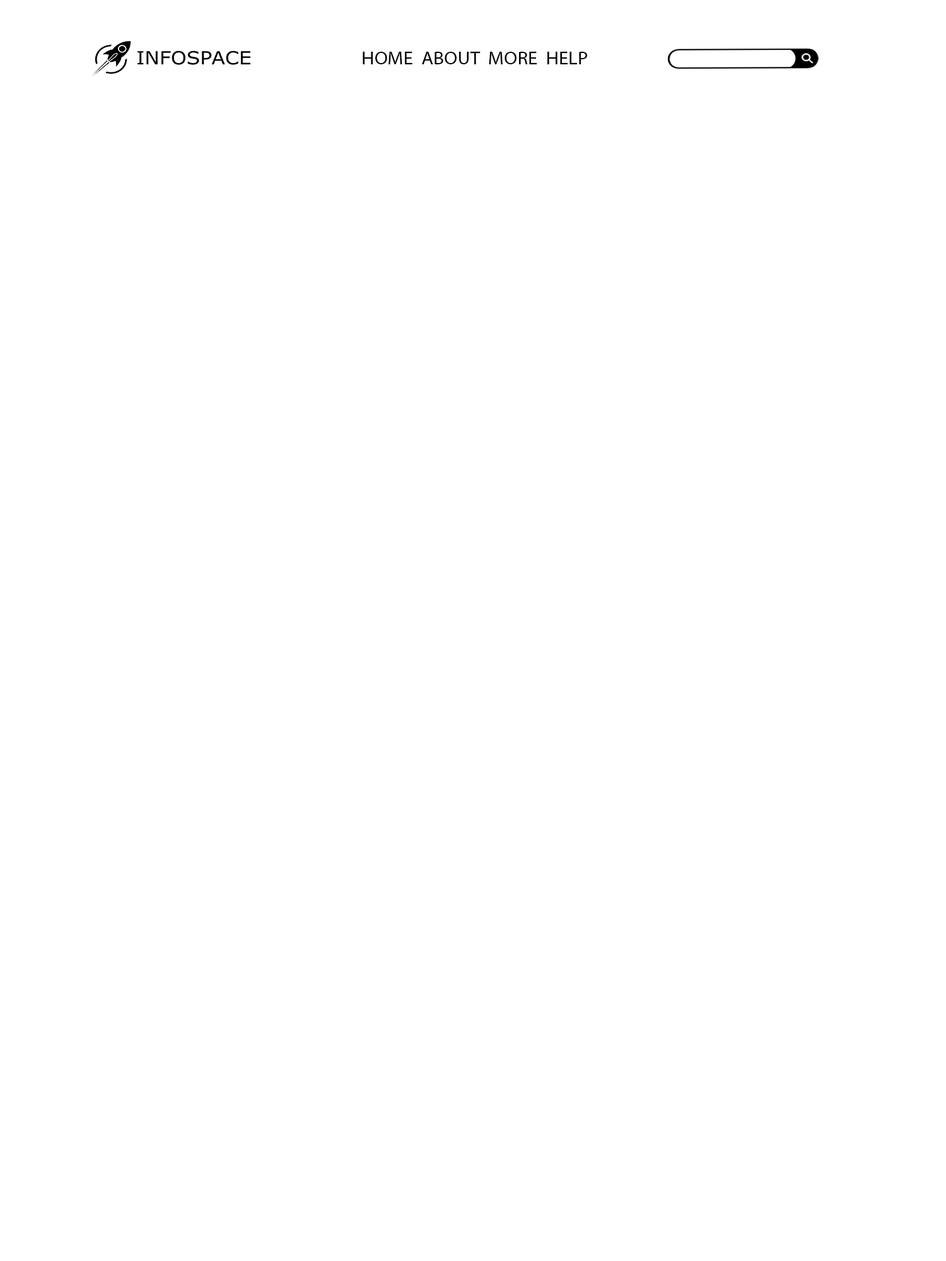
<style>
.page{position:relative;width:946px;height:1261px;background:#ffffff}
.page>*{position:absolute;margin:0}
.t1{font:18.6px "MyriadPro-Regular";color:#000000;scale:1.06 1}
</style>
<div class="page">
<p class="t1" style="left:363px;top:52px;width:224px;height:12px">HOME  ABOUT  MORE  HELP</p>
</div>
